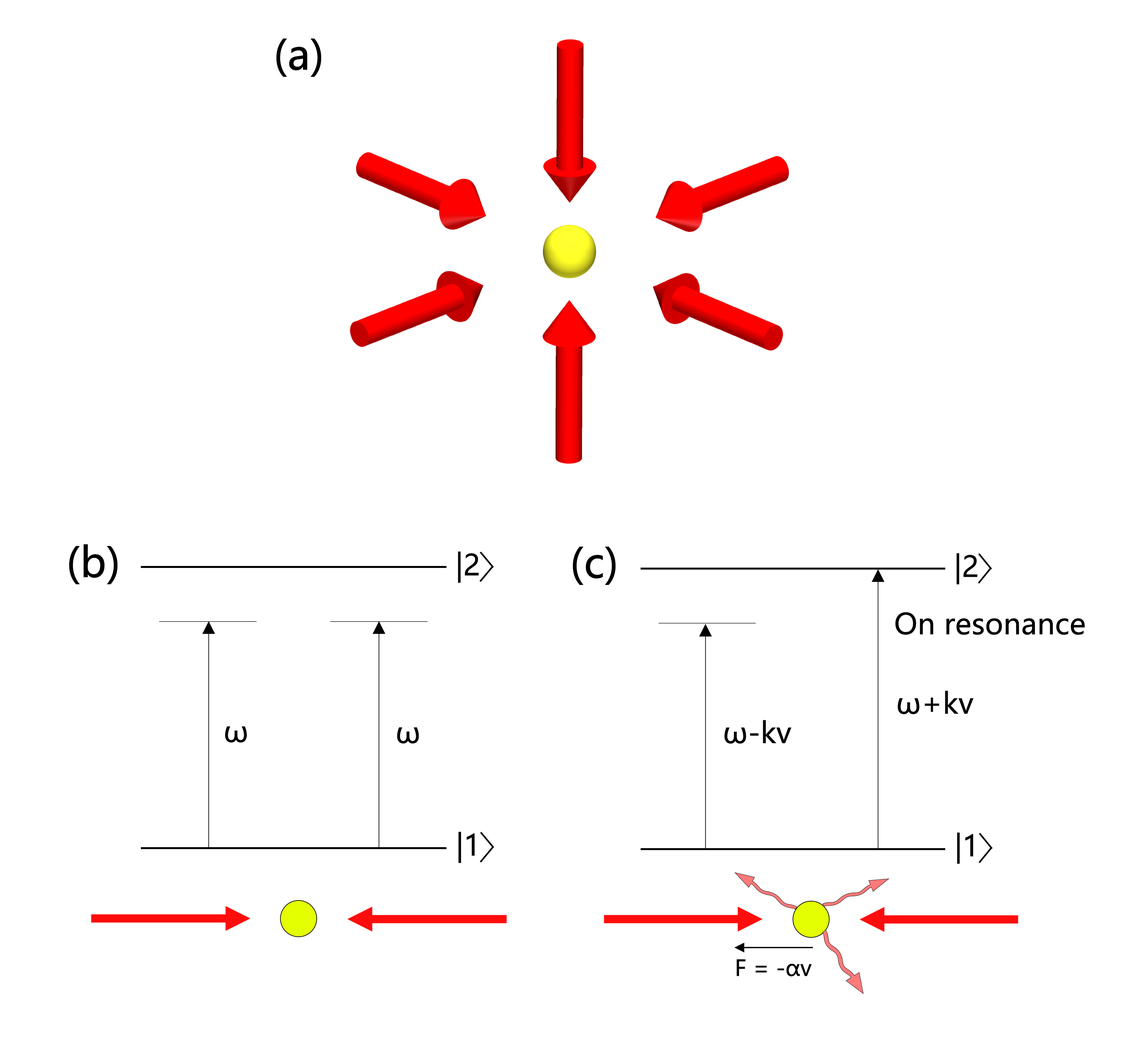
<style>
.page{position:relative;width:1142px;height:1044px;background:#ffffff}
.page>*{position:absolute;margin:0}
.t1{font:40.9px "MicrosoftYaHeiUI";letter-spacing:-0.02em;color:#000000;font-weight:bold}
.t2{font:28.7px "MicrosoftYaHeiUI";letter-spacing:-0.02em;color:#000000;font-weight:bold}
.t3{font:28.6px "MicrosoftYaHeiUI";letter-spacing:-0.02em;color:#000000;font-weight:bold}
.t4{font:21.8px "MicrosoftYaHeiUI";letter-spacing:-0.02em;color:#000000;font-weight:bold}
</style>
<div class="page">
<p class="t1" style="left:276px;top:38px;width:45px;height:39px">(a)</p>
<p class="t1" style="left:69px;top:544px;width:49px;height:40px">(b)</p>
<p class="t2" style="left:458px;top:551px;width:21px;height:32px">|2</p>
<p class="t1" style="left:573px;top:546px;width:43px;height:39px">(c)</p>
<p class="t3" style="left:957px;top:553px;width:21px;height:32px">|2</p>
<p class="t3" style="left:895px;top:612px;width:190px;height:23px">On resonance</p>
<p class="t3" style="left:898px;top:690px;width:76px;height:24px">ω+kv</p>
<p class="t3" style="left:724px;top:720px;width:67px;height:24px">ω-kv</p>
<p class="t2" style="left:225px;top:726px;width:22px;height:16px">ω</p>
<p class="t2" style="left:397px;top:727px;width:22px;height:16px">ω</p>
<p class="t2" style="left:458px;top:832px;width:17px;height:31px">|1</p>
<p class="t3" style="left:957px;top:832px;width:17px;height:32px">|1</p>
<p class="t4" style="left:737px;top:959px;width:75px;height:18px">F = -αv</p>
</div>
